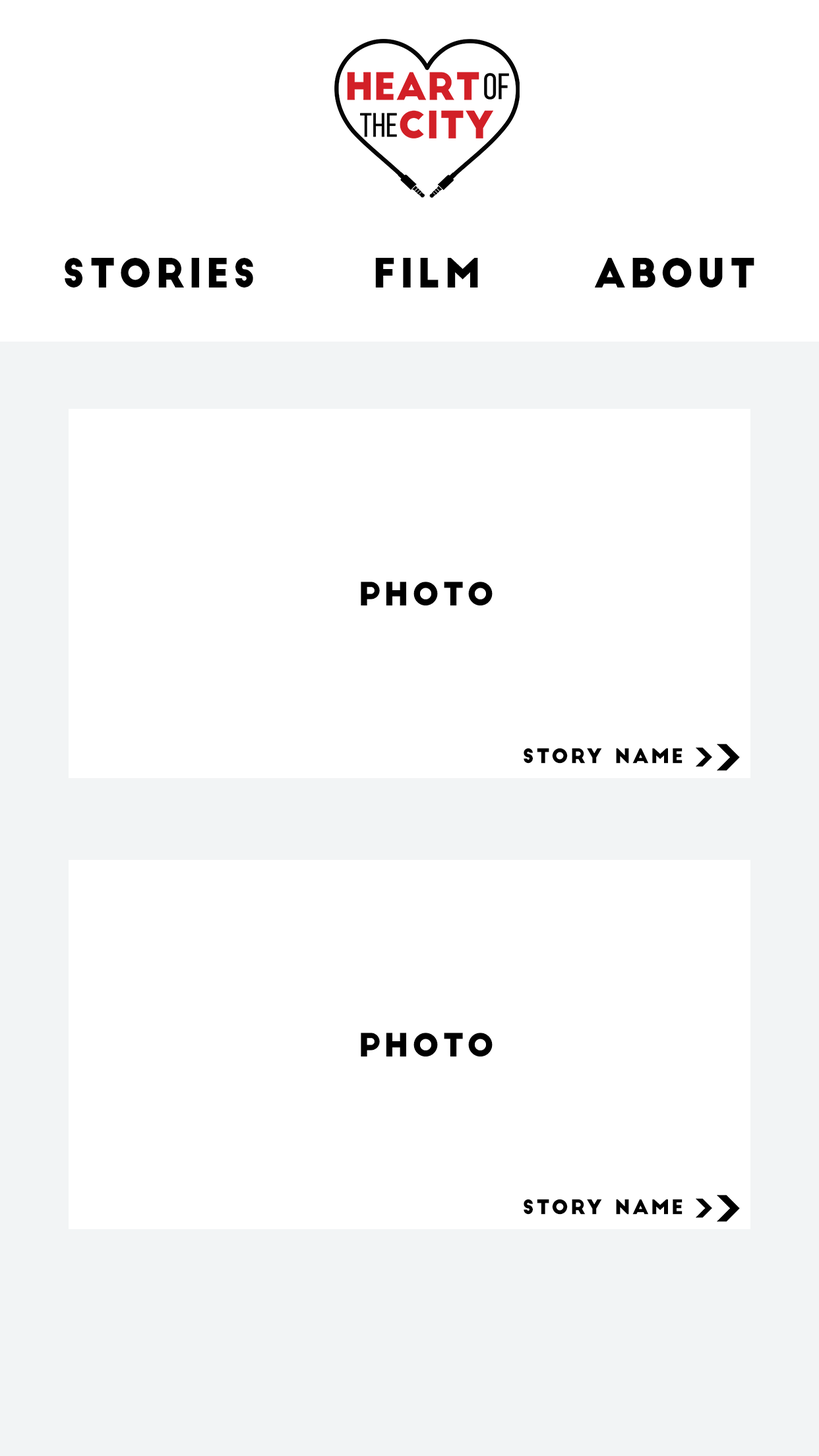
<style>
.page{position:relative;width:819px;height:1456px;background:#ffffff}
.page>*{position:absolute;margin:0}
.t1{font:39.6px "BigJohn";letter-spacing:0.1em;color:#000000}
.t2{font:31.7px "BigJohn";letter-spacing:0.1em;color:#000000}
.t3{font:19.8px "BigJohn";letter-spacing:0.1em;color:#000000}
</style>
<div class="page">
<p class="t1" style="left:65px;top:258px;width:188px;height:30px">stories</p>
<p class="t1" style="left:375px;top:258px;width:103px;height:30px">film</p>
<p class="t1" style="left:594px;top:258px;width:160px;height:30px">about</p>
<p class="t2" style="left:361px;top:582px;width:132px;height:24px">photo</p>
<p class="t3" style="left:524px;top:748px;width:158px;height:16px">story name</p>
<p class="t2" style="left:361px;top:1033px;width:132px;height:24px">photo</p>
<p class="t3" style="left:524px;top:1199px;width:158px;height:16px">story name</p>
</div>
